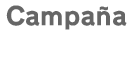
<style>
.page{position:relative;width:135px;height:70px;background:#ffffff}
.page>*{position:absolute;margin:0}
.t1{font:26px "Transport-Heavy-Regular";color:#666666}
</style>
<div class="page">
<p class="t1" style="left:6px;top:5px;width:121px;height:25px">Campaña</p>
</div>
